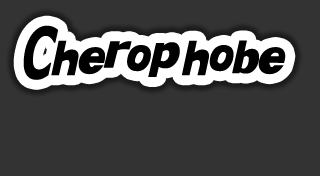
<style>
.page{position:relative;width:320px;height:176px;background:#333333}
.page>*{position:absolute;margin:0}
.t1{font:45px "KittyKatt";color:#000000}
</style>
<div class="page">
<p class="t1" style="left:23px;top:25px;width:263px;height:55px">Cherophobe</p>
</div>
